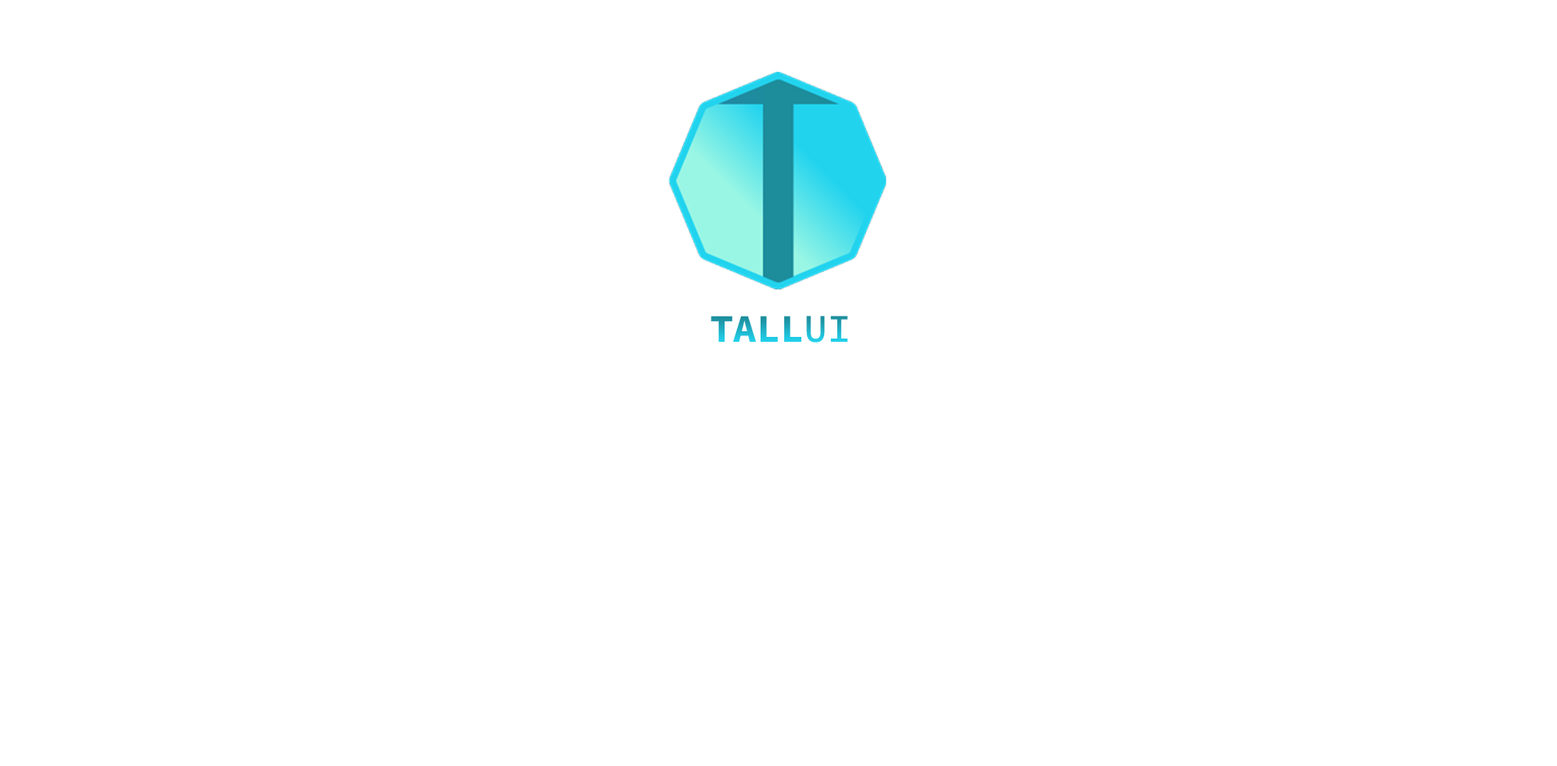
<style>
.page{position:relative;width:1557px;height:766px;background:#ffffff}
.page>*{position:absolute;margin:0}
.t1{font:39.2px "SourceCodePro-Bold"}
.t2{font:39.2px "SourceCodePro-Medium"}
</style>
<div class="page">
<p class="t1" style="left:711px;top:316px;width:137px;height:27px">TALL<span class="t2">UI</span></p>
</div>
